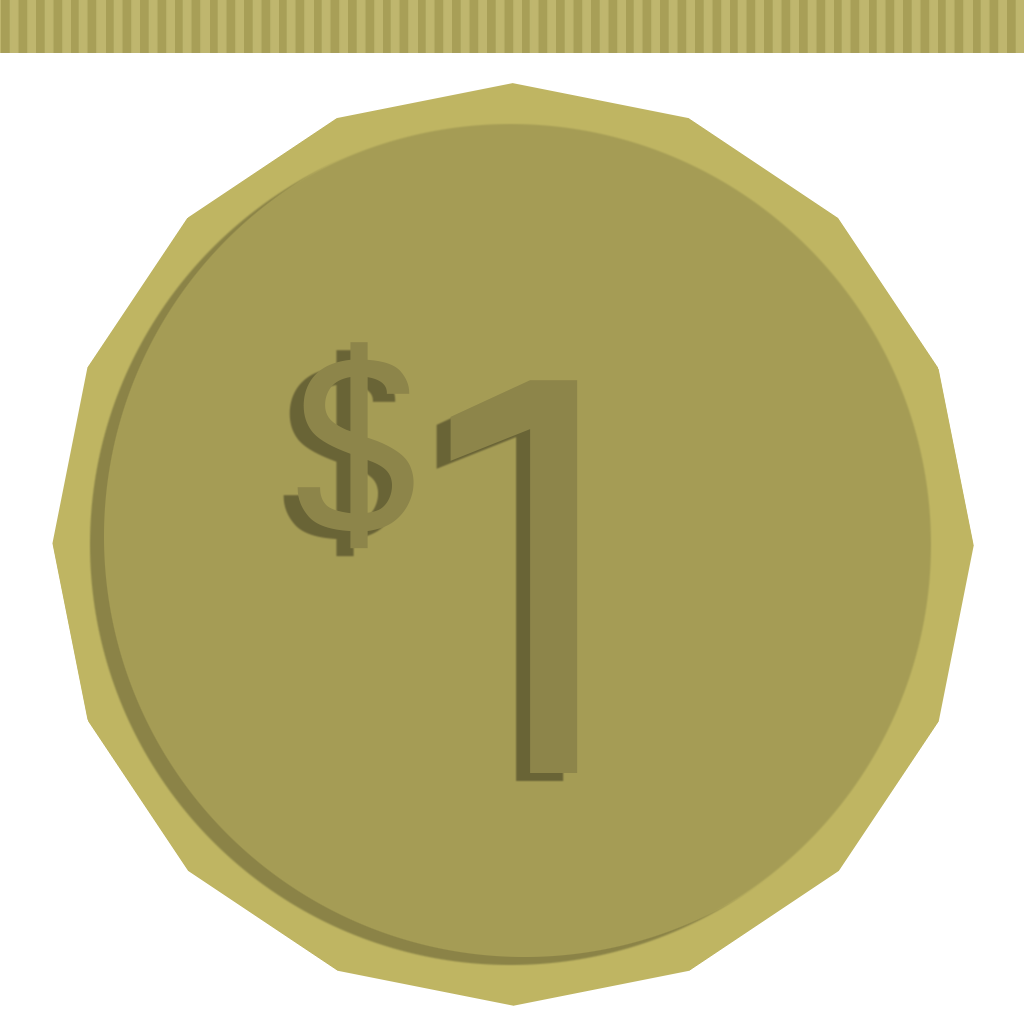
<style>
.page{position:relative;width:1024px;height:1024px;background:#a59c55}
.page>*{position:absolute;margin:0}
.t1{font:729.9px "AppleSymbols";color:#8d854a}
</style>
<div class="page">
<p class="t1" style="left:450px;top:380px;width:128px;height:393px">1</p>
</div>
